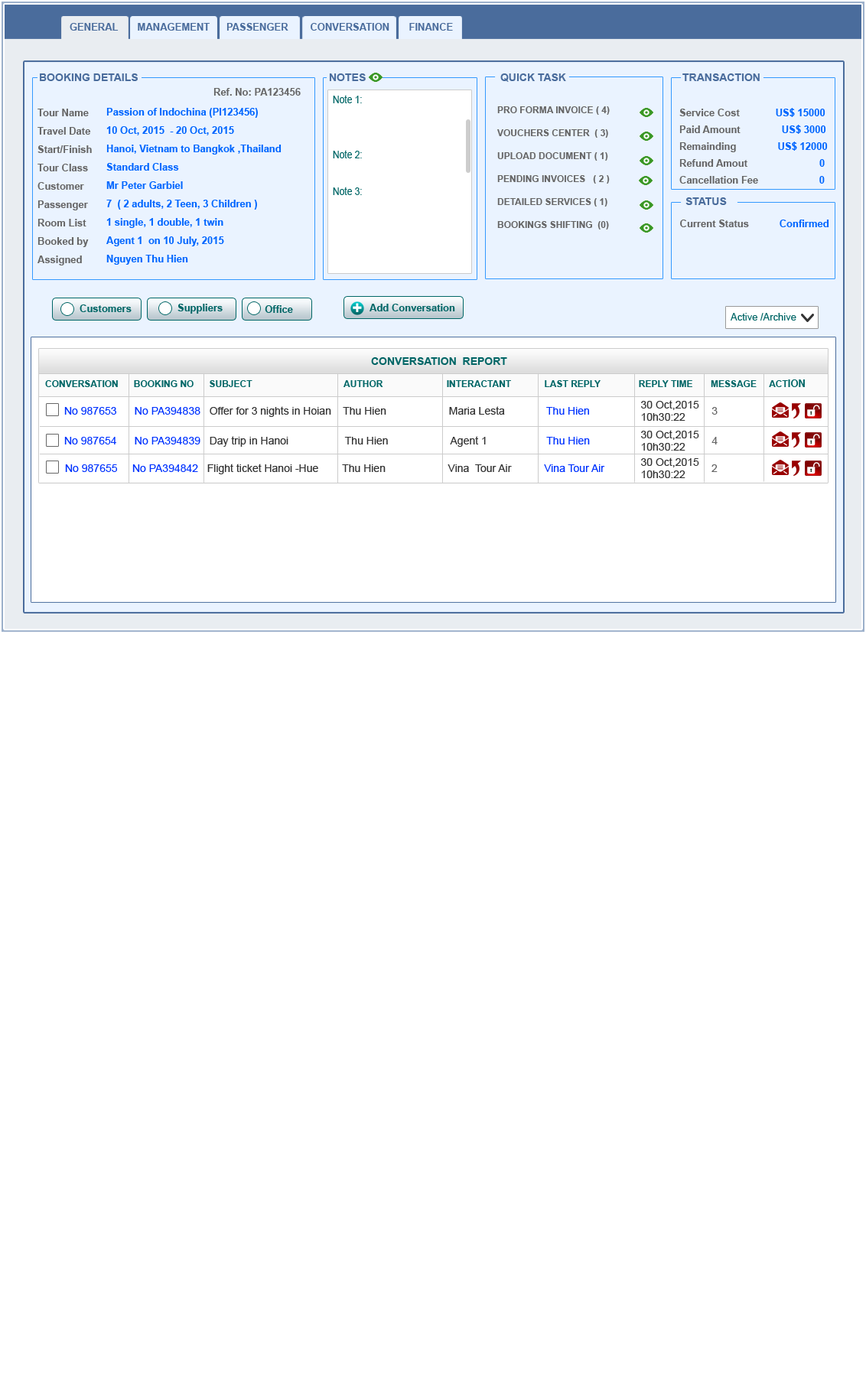
<style>
.page{position:relative;width:866px;height:1377px;background:#ffffff}
.page>*{position:absolute;margin:0}
.t1{font:9.9px "Arial-BoldMT";color:#4a6c9c}
.t2{font:10.7px "Arial-BoldMT";color:#4a6c9c}
.t3{font:9.9px "Arial-BoldMT";color:#666666}
.t4{font:11px/18.4px "ArialMT";color:#006666;scale:0.83 1}
.t5{font:9.9px/18.4px "Arial-BoldMT";color:#666666}
.t6{font:9.9px/19.9px "Arial-BoldMT";color:#666666}
.t7{font:9.9px/18.4px "Arial-BoldMT";color:#0066ff}
.t8{font:9.2px/22.9px "Arial-BoldMT";color:#666666}
.t9{font:9.2px "Arial-BoldMT";color:#666666}
.t10{font:9.9px/16.8px "Arial-BoldMT";color:#666666}
.t11{font:9.9px/16.8px "Arial-BoldMT";color:#0066ff}
.t12{font:9.9px "Arial-BoldMT";color:#0066ff}
.t13{font:9.9px "Arial-BoldMT";color:#006666}
.t14{font:9.9px "ArialMT";color:#006666}
.t15{font:10.7px "Arial-BoldMT";color:#006666}
.t16{font:9.2px "Arial-BoldMT";color:#006666}
.t17{font:10.7px "ArialMT";color:#333333}
.t18{font:10.7px "ArialMT";color:#0033ff}
.t19{font:10.7px "ArialMT";color:#666666}
</style>
<div class="page">
<p class="t1" style="left:70px;top:23px;width:383px;height:8px">GENERAL       MANAGEMENT      PASSENGER        CONVERSATION       FINANCE</p>
<p class="t2" style="left:40px;top:73px;width:98px;height:8px">BOOKING DETAILS</p>
<p class="t2" style="left:329px;top:73px;width:37px;height:8px">NOTES</p>
<p class="t2" style="left:500px;top:73px;width:66px;height:9px">QUICK TASK</p>
<p class="t2" style="left:682px;top:73px;width:78px;height:8px">TRANSACTION</p>
<p class="t3" style="left:213px;top:88px;width:88px;height:8px">Ref. No: PA123456</p>
<p class="t4" style="left:333px;top:95px;width:29px;height:100px;text-align:justify">Note 1:<br><br><br>Note 2:<br><br>Note 3:</p>
<p class="t5" style="left:37px;top:109px;width:55px;height:156px;text-align:justify"><span class="t6"><br></span>Tour Name  <br>Travel Date<br>Start/Finish<br>Tour Class<br>Customer<br>Passenger<br>Room List<br>Booked by <br>Assigned</p>
<p class="t7" style="left:106px;top:108px;width:176px;height:157px;text-align:justify">Passion of Indochina (PI123456)<br>10 Oct, 2015  - 20 Oct, 2015<br>Hanoi, Vietnam to Bangkok ,Thailand<br>Standard Class<br>Mr Peter Garbiel<br>7  ( 2 adults, 2 Teen, 3 Children )<br>1 single, 1 double, 1 twin<br>Agent 1  on 10 July, 2015<br>Nguyen Thu Hien</p>
<p class="t8" style="left:497px;top:106px;width:113px;height:123px;text-align:justify"><span class="t9"><br></span>PRO FORMA INVOICE ( 4)<br>VOUCHERS CENTER  ( 3)<br>UPLOAD DOCUMENT ( 1)<br>PENDING INVOICES   ( 2 )<br>DETAILED SERVICES ( 1)<br>BOOKINGS SHIFTING  (0)</p>
<p class="t10" style="left:679px;top:108px;width:149px;height:76px;text-align:justify">Service Cost             <span class="t11">US$ 15000 <br></span>Paid Amount               <span class="t11">US$ 3000 <br></span>Remainding               <span class="t11">US$ 12000<br></span>Refund Amout                          <span class="t11">0<br></span>Cancellation Fee <span class="t11">                     0</span></p>
<p class="t2" style="left:685px;top:197px;width:42px;height:8px">STATUS</p>
<p class="t3" style="left:680px;top:220px;width:149px;height:7px">Current Status           <span class="t12">Confirmed</span></p>
<p class="t13" style="left:80px;top:304px;width:52px;height:8px">Customers</p>
<p class="t13" style="left:177px;top:304px;width:46px;height:10px">Suppliers</p>
<p class="t13" style="left:265px;top:305px;width:28px;height:8px">Office</p>
<p class="t13" style="left:369px;top:304px;width:86px;height:7px">Add Conversation</p>
<p class="t14" style="left:731px;top:313px;width:65px;height:8px">Active /Archive</p>
<p class="t15" style="left:371px;top:357px;width:136px;height:8px">CONVERSATION  REPORT</p>
<p class="t16" style="left:45px;top:379px;width:760px;height:8px">CONVERSATION      BOOKING NO      SUBJECT                                    AUTHOR                         INTERACTANT             LAST REPLY               REPLY TIME       MESSAGE     ACT<span class="t13">ION</span></p>
<p class="t17" style="left:641px;top:400px;width:58px;height:21px;text-align:justify">30 Oct,2015<br>10h30:22</p>
<p class="t17" style="left:64px;top:406px;width:654px;height:11px"><span class="t18">No 987653      No PA394838  </span> Offer for 3 nights in Hoian    Thu Hien                     Maria Lesta<span class="t18">              Thu Hien     </span><span class="t19">                                    3</span></p>
<p class="t17" style="left:64px;top:436px;width:654px;height:11px"><span class="t18">No 987654      No PA394839  </span> Day trip in Hanoi                   Thu Hien                     Agent 1      <span class="t18">              Thu Hien     </span><span class="t19">                                    4</span></p>
<p class="t17" style="left:641px;top:430px;width:58px;height:21px;text-align:justify">30 Oct,2015<br>10h30:22</p>
<p class="t17" style="left:641px;top:457px;width:58px;height:21px;text-align:justify">30 Oct,2015<br>10h30:22</p>
<p class="t17" style="left:65px;top:464px;width:653px;height:10px"><span class="t18">No 987655     No PA394842  </span> Flight ticket Hanoi -Hue        Thu Hien                     Vina  Tour Air    <span class="t18">       Vina Tour Air         </span><span class="t19">                           2</span></p>
</div>
